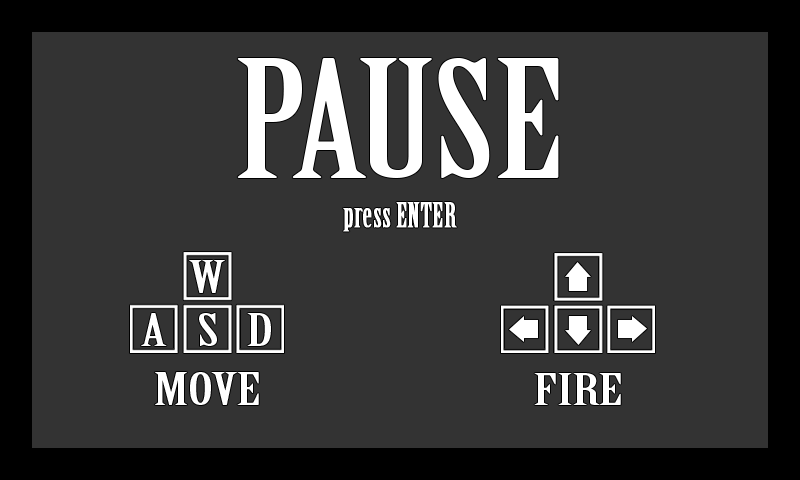
<style>
.page{position:relative;width:800px;height:480px;background:#333333}
.page>*{position:absolute;margin:0}
.t1{font:160.1px "BirchStd";color:#ffffff;scale:1.39 1}
.t2{font:34px "BirchStd";color:#ffffff;font-weight:bold}
.t3{font:43.6px "BirchStd";color:#ffffff;scale:1.78 1}
.t4{font:43.3px "BirchStd";color:#ffffff;scale:1.79 1}
</style>
<div class="page">
<p class="t1" style="left:237px;top:58px;width:322px;height:120px">PAUSE</p>
<p class="t2" style="left:343px;top:202px;width:114px;height:30px">press ENTER</p>
<p class="t3" style="left:189px;top:260px;width:36px;height:33px">W</p>
<p class="t3" style="left:141px;top:313px;width:26px;height:33px">A</p>
<p class="t3" style="left:199px;top:313px;width:18px;height:33px">S</p>
<p class="t3" style="left:247px;top:313px;width:24px;height:33px">D</p>
<p class="t3" style="left:154px;top:372px;width:105px;height:33px">MOVE</p>
<p class="t4" style="left:534px;top:373px;width:87px;height:32px">FIRE</p>
</div>
